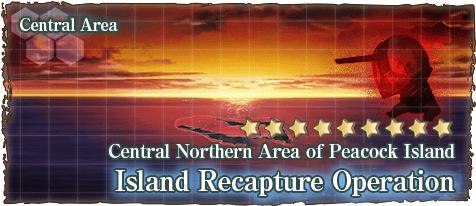
<style>
.page{position:relative;width:476px;height:206px}
.page>*{position:absolute;margin:0}
.t1{font:17px "RyuminPro-ExBold";letter-spacing:-0.04em;color:#ffffff}
.t2{font:19px "RyuminPro-ExBold";letter-spacing:-0.04em;color:#ffffff}
.t3{font:28px "RyuminPro-ExBold";letter-spacing:-0.04em;color:#ffffff}
</style>
<div class="page">
<p class="t1" style="left:20px;top:18px;width:98px;height:13px">Central Area</p>
<p class="t2" style="left:109px;top:143px;width:346px;height:16px">Central Northern Area of Peacock Island</p>
<p class="t3" style="left:115px;top:170px;width:339px;height:26px">Island Recapture Operation</p>
</div>
